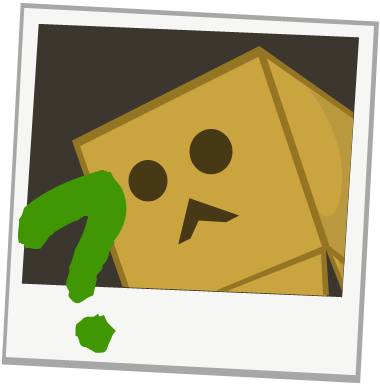
<style>
.page{position:relative;width:380px;height:386px;background:#caa43f}
.page>*{position:absolute;margin:0}
.t1{font:215.4px "PermanentMarker";color:#419603}
</style>
<div class="page">
<p class="t1" style="left:18px;top:170px;width:109px;height:183px;rotate:-34deg">?</p>
</div>
